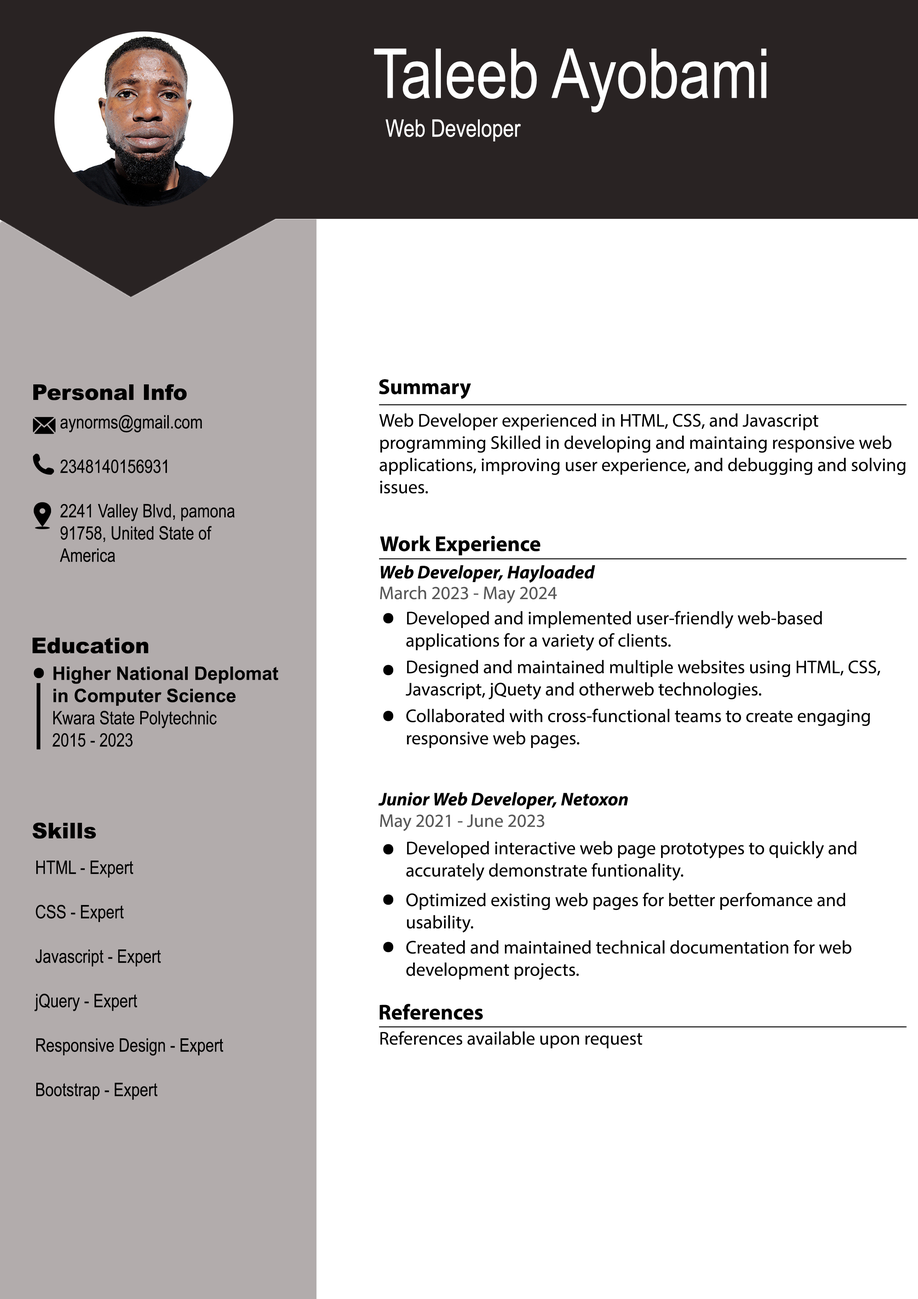
<style>
.page{position:relative;width:918px;height:1299px;background:#ffffff}
.page>*{position:absolute;margin:0}
.t1{font:68.8px "ArialNarrow";color:#ffffff}
.t2{font:24px "ArialNarrow";color:#ffffff}
.t3{font:21.6px "Arial-Black";color:#000000}
.t4{font:21.6px "MyriadPro-Bold";color:#000000}
.t5{font:18.5px "MyriadPro-Regular";color:#000000}
.t6{font:18.5px "ArialNarrow";color:#000000}
.t7{font:18.5px "MyriadPro-BoldIt";color:#000000}
.t8{font:18.5px "MyriadPro-Regular";color:#585858}
.t9{font:55.6px "MyriadPro-Bold";color:#000000}
.t10{font:18.5px "Arial-BoldMT";color:#000000}
</style>
<div class="page">
<p class="t1" style="left:374px;top:48px;width:393px;height:65px">Taleeb Ayobami</p>
<p class="t2" style="left:386px;top:119px;width:135px;height:22px">Web Developer</p>
<p class="t3" style="left:33px;top:384px;width:154px;height:16px">Personal Info</p>
<p class="t4" style="left:379px;top:379px;width:92px;height:20px">Summary</p>
<p class="t5" style="left:379px;top:413px;width:527px;height:81px">Web Developer experienced in HTML, CSS, and Javascript<br>programming Skilled in developing and maintaing responsive web<br>applications, improving user experience, and debugging and solving<br>issues.</p>
<p class="t5" style="left:379px;top:404px;width:528px;height:1px">_________________________________________________________</p>
<p class="t6" style="left:60px;top:415px;width:175px;height:147px">aynorms@gmail.com<br><br>2348140156931<br><br>2241 Valley Blvd, pamona<br>91758, United State of<br>America</p>
<p class="t4" style="left:380px;top:535px;width:161px;height:20px">Work Experience</p>
<p class="t5" style="left:379px;top:558px;width:528px;height:1px">_________________________________________________________</p>
<p class="t7" style="left:381px;top:565px;width:214px;height:18px">Web Developer, Hayloaded</p>
<p class="t8" style="left:380px;top:586px;width:177px;height:17px">March 2023 - May 2024</p>
<p class="t9" style="left:383px;top:613px;width:11px;height:10px">.</p>
<p class="t5" style="left:406px;top:610px;width:416px;height:41px">Developed and implemented user-friendly web-based<br>applications for a variety of clients.</p>
<p class="t3" style="left:33px;top:638px;width:115px;height:15px">Education</p>
<p class="t9" style="left:383px;top:665px;width:11px;height:10px">.</p>
<p class="t5" style="left:406px;top:660px;width:474px;height:40px">Designed and maintained multiple websites using HTML, CSS, <br>Javascript, jQuety and otherweb technologies.</p>
<p class="t9" style="left:34px;top:668px;width:10px;height:10px">.</p>
<p class="t10" style="left:53px;top:666px;width:225px;height:81px"><span class="t3"><br><br></span>Higher National Deplomat<br>in Computer Science<br><span class="t6">Kwara State Polytechnic<br>2015 - 2023</span></p>
<p class="t9" style="left:383px;top:710px;width:11px;height:11px">.</p>
<p class="t5" style="left:406px;top:708px;width:464px;height:40px">Collaborated with cross-functional teams to create engaging<br>responsive web pages.</p>
<p class="t7" style="left:378px;top:792px;width:250px;height:17px">Junior Web Developer, Netoxon</p>
<p class="t8" style="left:380px;top:814px;width:165px;height:17px">May 2021 - June 2023</p>
<p class="t3" style="left:33px;top:822px;width:63px;height:17px">Skills</p>
<p class="t9" style="left:383px;top:844px;width:11px;height:10px">.</p>
<p class="t5" style="left:406px;top:841px;width:451px;height:40px">Developed interactive web page prototypes to quickly and<br>accurately demonstrate funtionality.</p>
<p class="t6" style="left:34px;top:860px;width:189px;height:240px"><span class="t3"><br></span><br>HTML - Expert<br><br>CSS - Expert<br><br>Javascript - Expert<br><br>jQuery - Expert<br><br>Responsive Design - Expert<br><br>Bootstrap - Expert</p>
<p class="t5" style="left:406px;top:892px;width:440px;height:41px">Optimized existing web pages for better perfomance and <br>usability.</p>
<p class="t9" style="left:383px;top:894px;width:11px;height:11px">.</p>
<p class="t9" style="left:383px;top:941px;width:11px;height:11px">.</p>
<p class="t5" style="left:406px;top:940px;width:446px;height:40px">Created and maintained technical documentation for web <br>development projects.</p>
<p class="t4" style="left:379px;top:1004px;width:104px;height:16px">References</p>
<p class="t5" style="left:379px;top:1026px;width:528px;height:1px">_________________________________________________________</p>
<p class="t5" style="left:380px;top:1031px;width:262px;height:17px">References available upon request</p>
</div>
